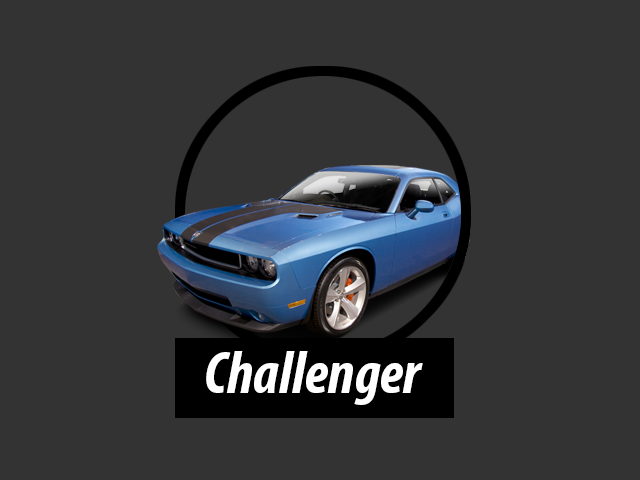
<style>
.page{position:relative;width:640px;height:480px;background:#333333}
.page>*{position:absolute;margin:0}
.t1{font:60px "MyriadPro-BoldCondIt";color:#ffffff}
</style>
<div class="page">
<p class="t1" style="left:206px;top:351px;width:217px;height:54px">Challenger</p>
</div>
